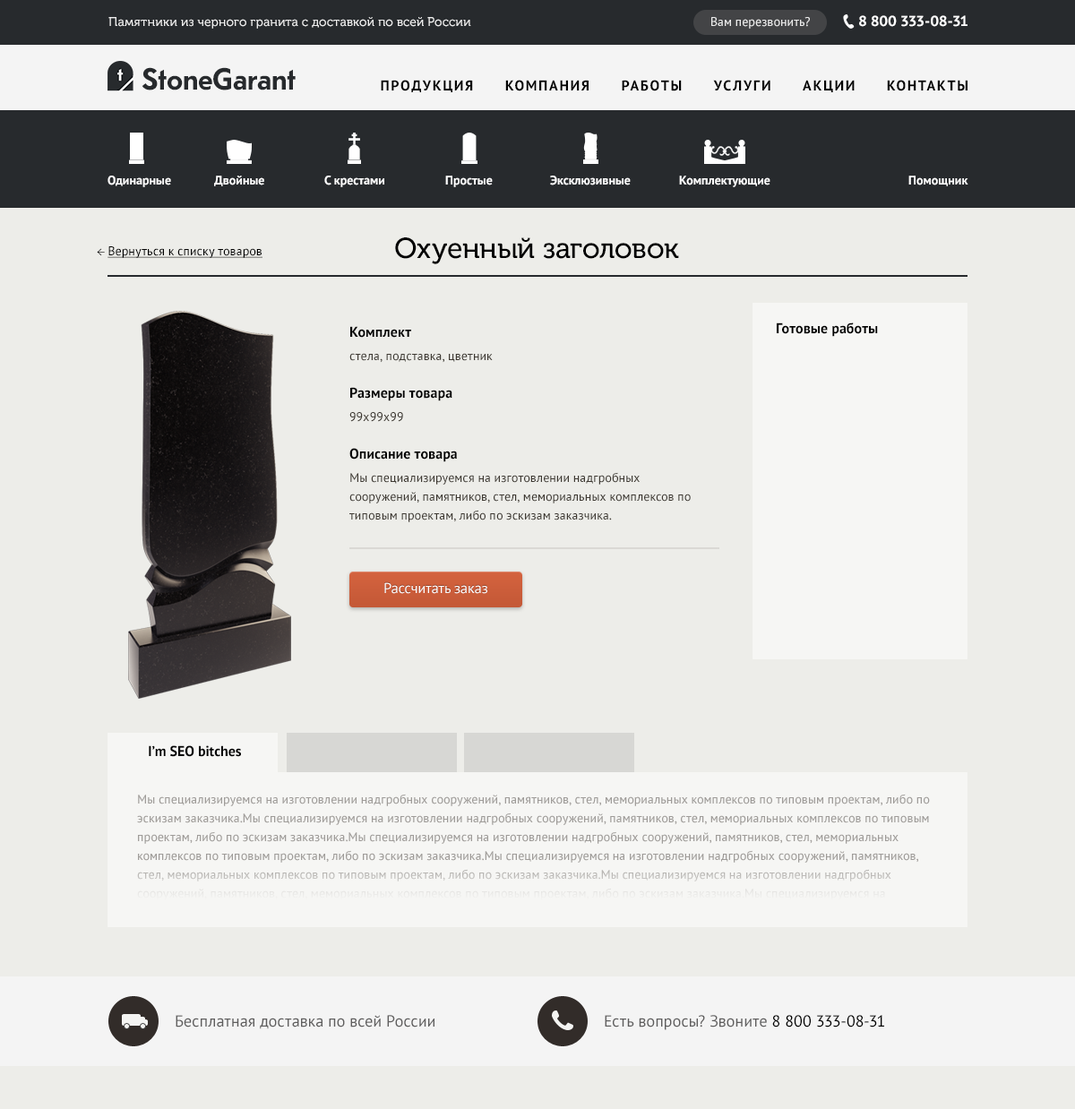
<style>
.page{position:relative;width:1075px;height:1109px;background:#edede9}
.page>*{position:absolute;margin:0}
.t1{font:12.5px "MuseoCyrl-500";color:#ededed}
.t2{font:12.5px "PTSans-Regular";color:#ededed}
.t3{font:14.3px "PTSans-CaptionBold";color:#ffffff}
.t4{font:30.5px "TelefonWebBold";letter-spacing:-0.01em;color:#272a2d}
.t5{font:14.3px "PTSans-Bold";letter-spacing:0.1em;color:#010101;text-transform:uppercase}
.t6{font:12.5px "PTSans-Bold";color:#ffffff}
.t7{font:28.7px "MuseoCyrl-500";color:#000000}
.t8{font:12.5px "PTSans-Regular";color:#000000;text-decoration:underline}
.t9{font:12.5px "MinionPro-Regular";color:#000000}
.t10{font:12.5px/18.8px "PTSans-Regular";color:#3e3932}
.t11{font:14.3px/18.8px "PTSans-Bold";color:#000000}
.t12{font:14.3px "PTSans-Bold";color:#000000}
.t13{font:14.3px "PTSans-Regular";color:#ffffff}
.t14{font:16.1px "PTSans-Regular";color:#5e5d5d}
.t15{font:16.1px "PTSans-Regular";color:#000000}
</style>
<div class="page">
<p class="t1" style="left:108px;top:17px;width:363px;height:12px">Памятники из черного гранита с доставкой по всей России</p>
<p class="t2" style="left:711px;top:17px;width:99px;height:12px">Вам перезвонить?</p>
<p class="t3" style="left:859px;top:15px;width:109px;height:12px">8 800 333-08-31</p>
<p class="t4" style="left:142px;top:67px;width:154px;height:23px">StoneGarant</p>
<p class="t5" style="left:381px;top:80px;width:587px;height:12px">Продукция      Компания      Работы      услуги      акции      Контакты</p>
<p class="t6" style="left:108px;top:176px;width:63px;height:11px">Одинарные</p>
<p class="t6" style="left:214px;top:176px;width:50px;height:10px">Двойные</p>
<p class="t6" style="left:324px;top:176px;width:60px;height:11px">С крестами</p>
<p class="t6" style="left:445px;top:176px;width:48px;height:11px">Простые</p>
<p class="t6" style="left:550px;top:176px;width:81px;height:9px">Эксклюзивные</p>
<p class="t6" style="left:679px;top:176px;width:91px;height:11px">Комплектующие</p>
<p class="t6" style="left:908px;top:176px;width:60px;height:10px">Помощник</p>
<p class="t7" style="left:395px;top:237px;width:284px;height:27px">Охуенный заголовок</p>
<p class="t8" style="left:97px;top:246px;width:166px;height:12px"><span class="t9">← </span>Вернуться к списку товаров</p>
<p class="t10" style="left:349px;top:326px;width:342px;height:196px"><span class="t11">Комплект<br></span>стела, подставка, цветник<br><br><span class="t11">Размеры товара<br></span>99х99х99<br><br><span class="t11">Описание товара<br></span>Мы специализируемся на изготовлении надгробных сооружений, памятников, стел, мемориальных комплексов по типовым проектам, либо по эскизам заказчика.</p>
<p class="t12" style="left:777px;top:323px;width:101px;height:14px">Готовые работы</p>
<p class="t13" style="left:384px;top:582px;width:103px;height:12px">Рассчитать заказ</p>
<p class="t12" style="left:149px;top:745px;width:92px;height:12px">I’m SEO bitches</p>
<p class="t14" style="left:176px;top:1015px;width:259px;height:14px">Бесплатная доставка по всей России</p>
<p class="t14" style="left:605px;top:1015px;width:279px;height:15px">Есть вопросы? Звоните <span class="t15">8 800 333-08-31</span></p>
</div>
